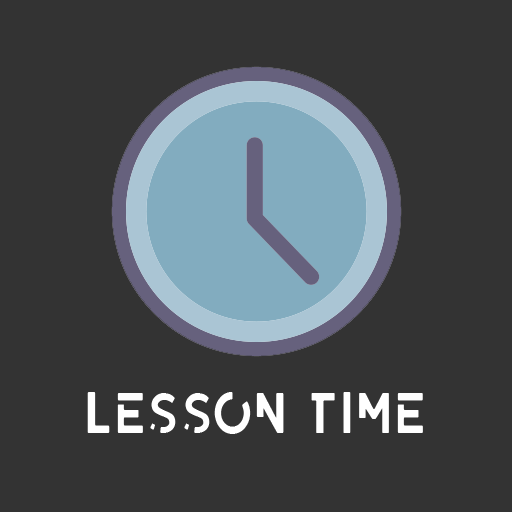
<style>
.page{position:relative;width:512px;height:512px;background:#333333}
.page>*{position:absolute;margin:0}
.t1{font:58.3px "LEIXO-DEMO";color:#ffffff;scale:0.85 1}
</style>
<div class="page">
<p class="t1" style="left:87px;top:392px;width:336px;height:42px">LESSON TIME</p>
</div>
